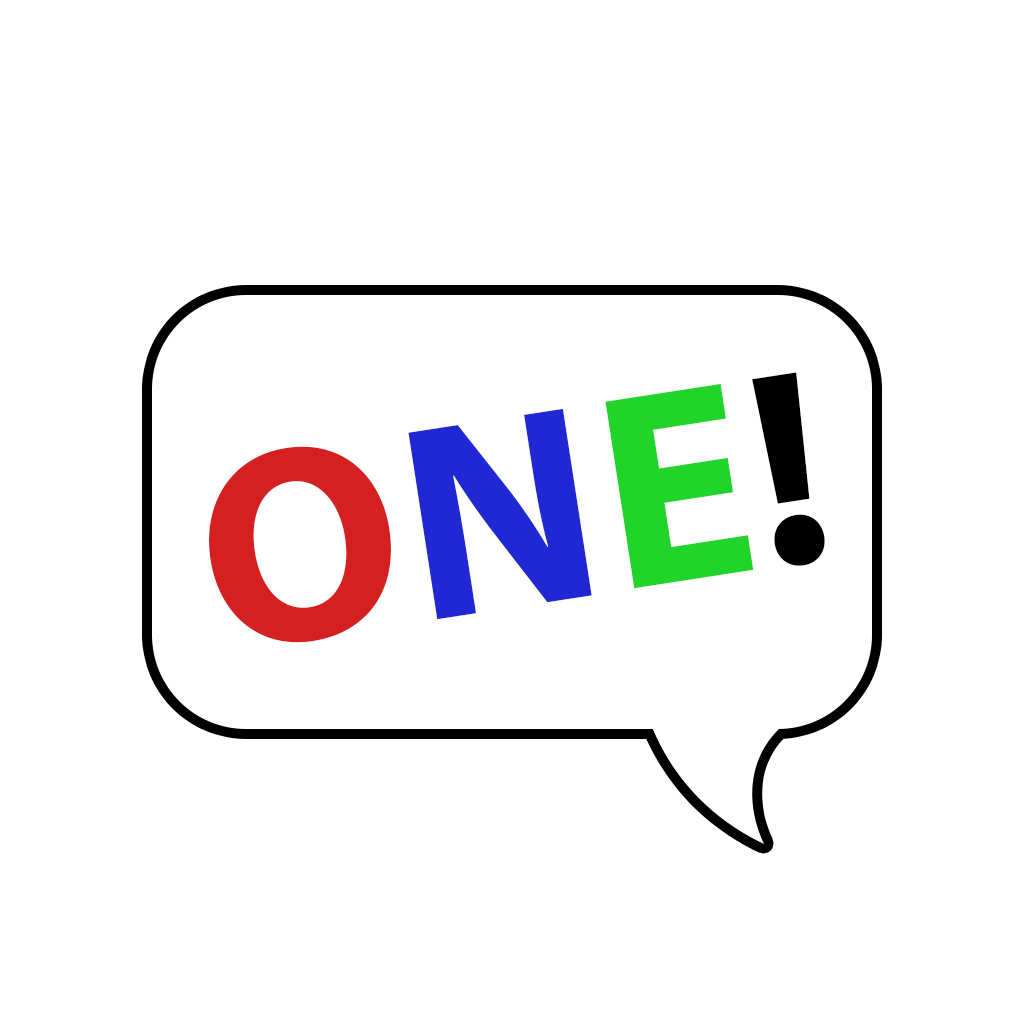
<style>
.page{position:relative;width:1024px;height:1024px;background:#ffffff}
.page>*{position:absolute;margin:0}
.t1{font:279.9px "MyriadPro-Bold";color:#d42020;text-transform:uppercase}
.t2{font:279.9px "MyriadPro-Bold";color:#2028d4;text-transform:uppercase}
.t3{font:279.9px "MyriadPro-Bold";color:#20d429;text-transform:uppercase}
.t4{font:279.9px "MyriadPro-Bold";color:#000000;text-transform:uppercase}
</style>
<div class="page">
<p class="t1" style="left:209px;top:372px;width:616px;height:271px;rotate:-9deg">O<span class="t2">N</span><span class="t3">E</span><span class="t4">!</span></p>
</div>
